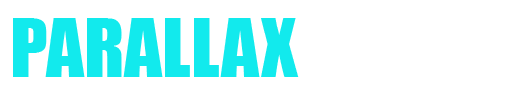
<style>
.page{position:relative;width:512px;height:96px;background:#ffffff}
.page>*{position:absolute;margin:0}
.t1{font:74.7px "Impact";color:#12eaed}
</style>
<div class="page">
<p class="t1" style="left:13px;top:18px;width:286px;height:59px">PARALLAX</p>
</div>
